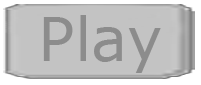
<style>
.page{position:relative;width:201px;height:85px;background:#c3c3c3}
.page>*{position:absolute;margin:0}
.t1{font:60px "Verdana";color:#8c8c8c}
</style>
<div class="page">
<p class="t1" style="left:43px;top:15px;width:118px;height:58px">Play</p>
</div>
